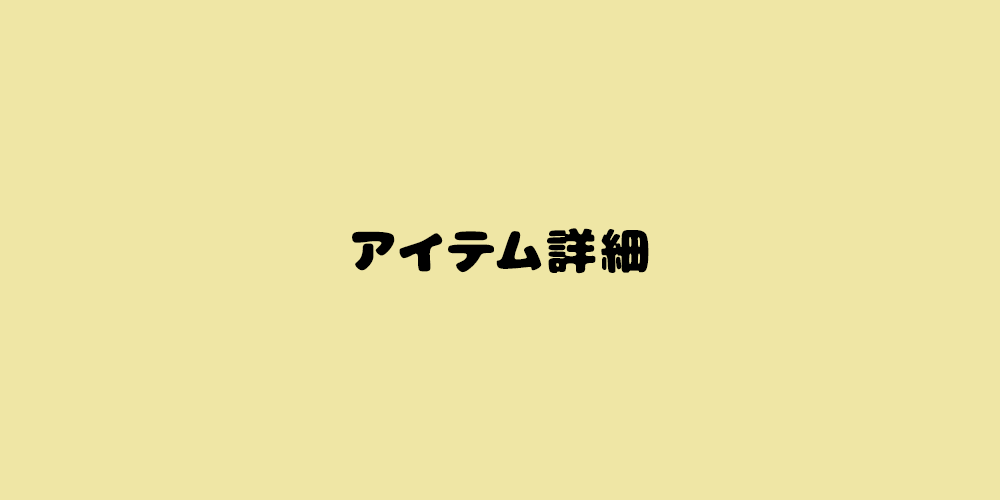
<style>
.page{position:relative;width:1000px;height:500px;background:#efe6a5}
.page>*{position:absolute;margin:0}
.t1{font:50px "07NikumaruFont";letter-spacing:0.08em;color:#000000}
</style>
<div class="page">
<p class="t1" style="left:352px;top:228px;width:297px;height:46px">アイテム詳細</p>
</div>
